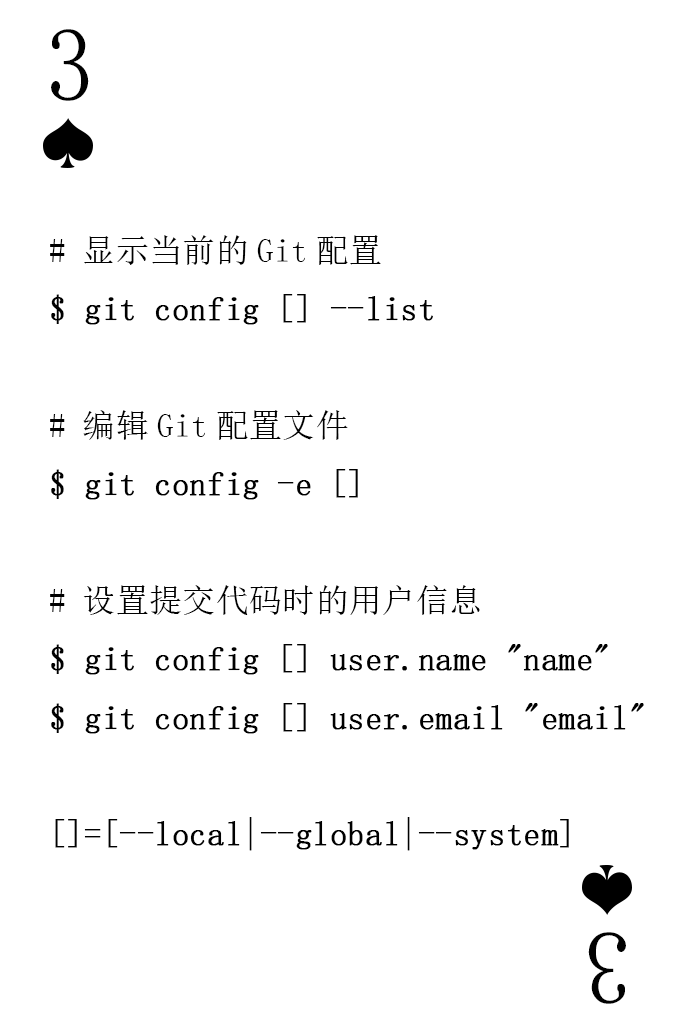
<style>
.page{position:relative;width:673px;height:1028px;background:#ffffff}
.page>*{position:absolute;margin:0}
.t1{font:104.2px "SimSun-ExtB";color:#010101;scale:0.93 1}
.t2{font:33.3px "SimSun";color:#000000;font-weight:bold}
.t3{font:33.3px "SimSun";color:#000000}
</style>
<div class="page">
<p class="t1" style="left:51px;top:29px;width:38px;height:72px">3</p>
<p class="t2" style="left:50px;top:235px;width:594px;height:616px"><span class="t3"># 显示当前的Git配置<br></span>$ git config [] --list<br><span class="t3"><br># 编辑Git配置文件<br></span>$ git config -e []<br><span class="t3"><br># 设置提交代码时的用户信息<br></span>$ git config [] user.name "name"<br>$ git config [] user.email "email"<br><br>[]=[--local|--global|--system]</p>
<p class="t1" style="left:588px;top:932px;width:38px;height:72px;rotate:180deg">3</p>
</div>
